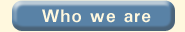
<style>
.page{position:relative;width:185px;height:32px;background:#5982a6}
.page>*{position:absolute;margin:0}
.t1{font:18px "Univers-Bold";letter-spacing:0.05em;color:#fff8de}
</style>
<div class="page">
<p class="t1" style="left:42px;top:9px;width:109px;height:14px">Who we are</p>
</div>
